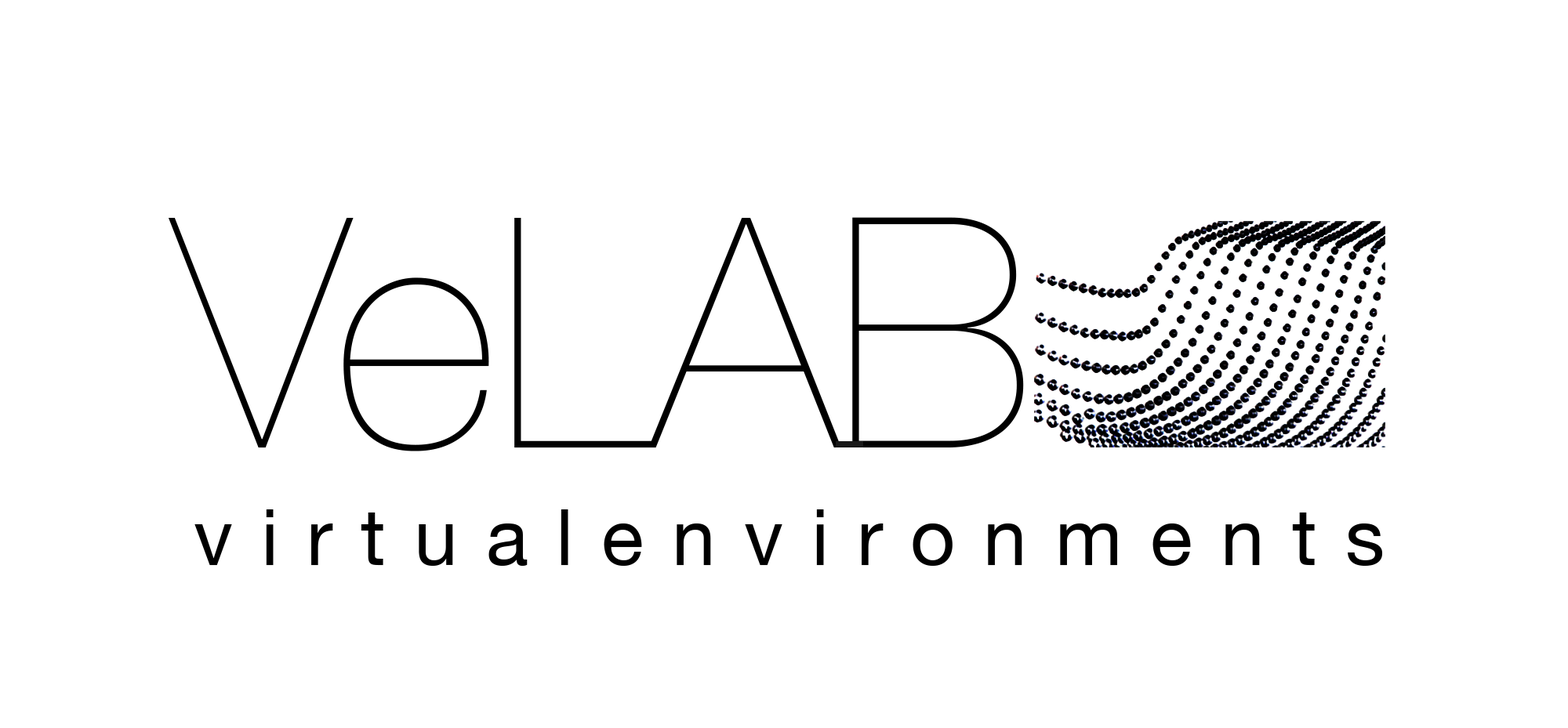
<style>
.page{position:relative;width:1568px;height:728px;background:#ffffff}
.page>*{position:absolute;margin:0}
.t1{font:322.3px "HelveticaNeue-UltraLight";color:#000000}
.t2{font:78.4px "HelveticaNeue";letter-spacing:0.36em;color:#000000}
</style>
<div class="page">
<p class="t1" style="left:169px;top:217px;width:855px;height:235px">VeLAB</p>
<p class="t2" style="left:194px;top:510px;width:1189px;height:56px">virtualenvironments</p>
</div>
